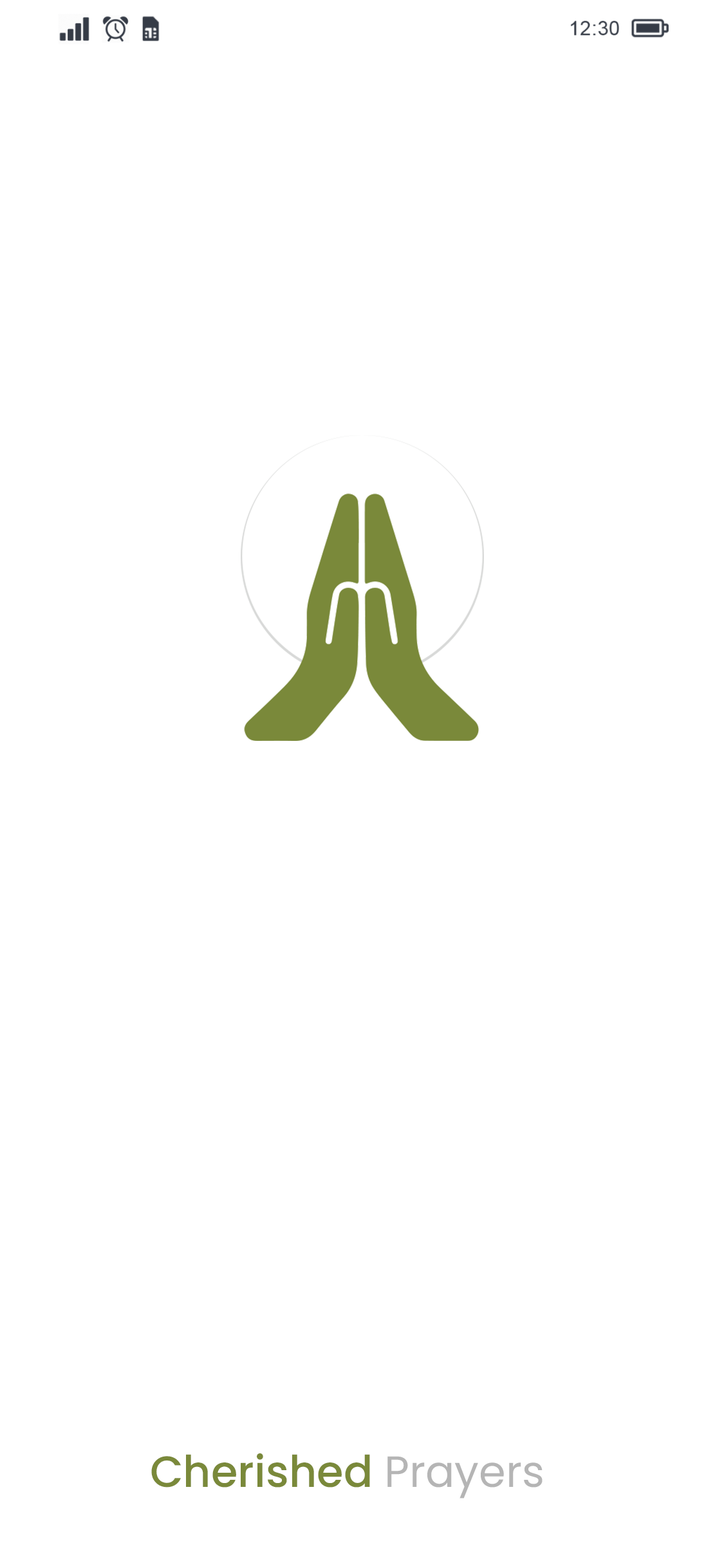
<style>
.page{position:relative;width:724px;height:1568px;background:#ffffff}
.page>*{position:absolute;margin:0}
.t1{font:43.6px "Poppins-Medium";color:#7a893a}
.t2{font:43.6px "Poppins-Regular";color:#b5b5b5}
</style>
<div class="page">
<p class="t1" style="left:151px;top:1453px;width:392px;height:45px">Cherished <span class="t2">Prayers</span></p>
</div>
